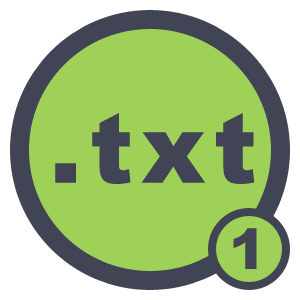
<style>
.page{position:relative;width:300px;height:300px;background:#9fd159}
.page>*{position:absolute;margin:0}
.t1{font:97.5px "Arial-Black";letter-spacing:0.08em;color:#404454}
.t2{font:56px "Arial-Black";letter-spacing:0.08em;color:#404454}
</style>
<div class="page">
<p class="t1" style="left:55px;top:113px;width:200px;height:71px">.txt</p>
<p class="t2" style="left:233px;top:228px;width:24px;height:41px">1</p>
</div>
